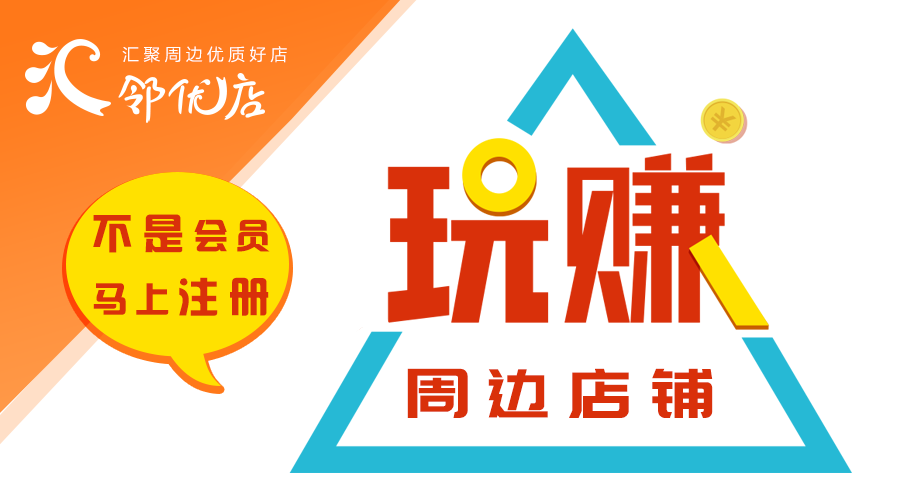
<style>
.page{position:relative;width:900px;height:500px;background:#ffffff}
.page>*{position:absolute;margin:0}
.t1{font:16.6px "FZLTXHK--GBK1-0";letter-spacing:0.27em;color:#ffffff}
.t2{font:33.5px/63.4px "FZHZGBJW--GB1-0";letter-spacing:0.27em;color:#d9300a}
.t3{font:40.2px/63.4px "FZHZGBJW--GB1-0";letter-spacing:0.27em;color:#d9300a}
.t4{font:67.7px "PangMenZhengDao";letter-spacing:0.27em;color:#d9300a}
</style>
<div class="page">
<p class="t1" style="left:122px;top:46px;width:165px;height:17px">汇聚周边优质好店</p>
<p class="t2" style="left:93px;top:214px;width:177px;height:102px;text-align:center"><span class="t3">不是</span>会员<br>马上<span class="t3">注册</span></p>
<p class="t4" style="left:407px;top:368px;width:306px;height:50px">周边店铺</p>
</div>
